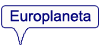
<style>
.page{position:relative;width:100px;height:50px;background:#ffffff}
.page>*{position:absolute;margin:0}
.t1{font:15px "ArialMT";color:#05057b}
</style>
<div class="page">
<p class="t1" style="left:10px;top:10px;width:81px;height:15px">Europlaneta</p>
</div>
